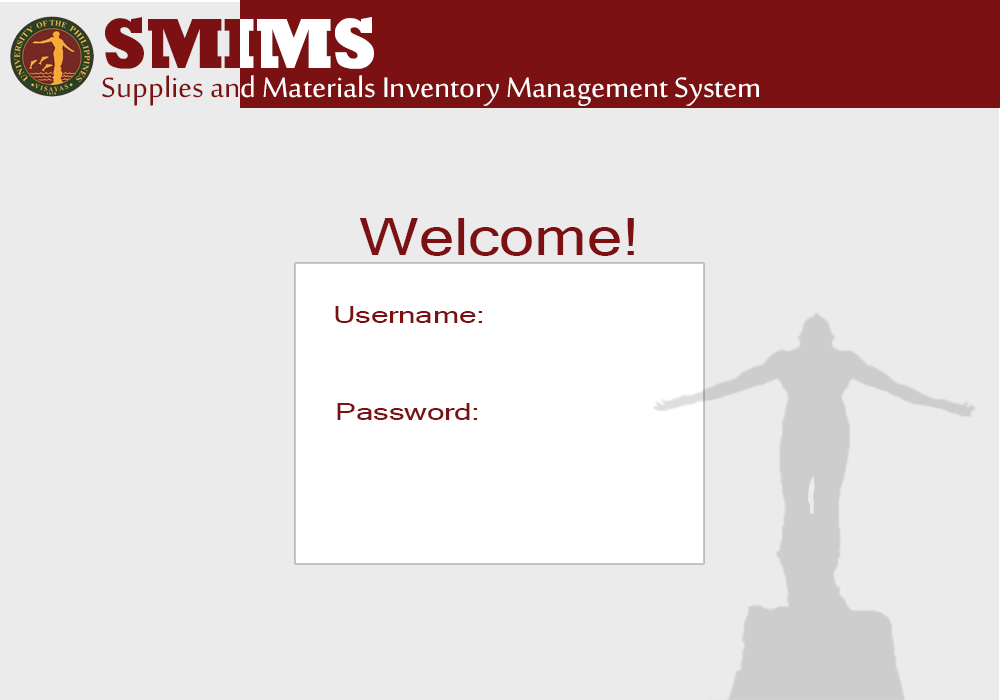
<style>
.page{position:relative;width:1000px;height:700px;background:#ebebeb}
.page>*{position:absolute;margin:0}
.t1{font:38.7px "SakkalMajalla";color:#ffffff}
.t2{font:38.7px "SakkalMajalla";color:#7b1113}
.t3{font:58px "Latha";color:#7b1113;scale:1.2 1}
.t4{font:26.1px "Latha";color:#7b1113;scale:1.32 1}
</style>
<div class="page">
<p class="t1" style="left:102px;top:75px;width:657px;height:31px"><span class="t2">Supplies an</span>d Materials Inventory Management System</p>
<p class="t3" style="left:359px;top:218px;width:275px;height:38px">Welcome!</p>
<p class="t4" style="left:335px;top:306px;width:147px;height:17px">Username:</p>
<p class="t4" style="left:337px;top:403px;width:140px;height:17px">Password:</p>
</div>
